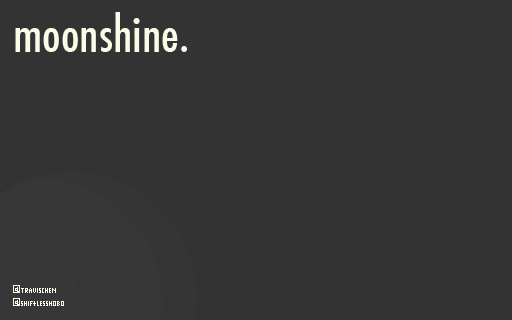
<style>
.page{position:relative;width:512px;height:320px;background:#333333}
.page>*{position:absolute;margin:0}
.t1{font:47.8px "Futura-CondensedMedium";color:#fbfbea}
.t2{font:47.8px "MyriadPro-Regular";color:#fbfbea}
</style>
<div class="page">
<p class="t1" style="left:15px;top:12px;width:172px;height:40px">moonshine<span class="t2">.</span></p>
</div>
